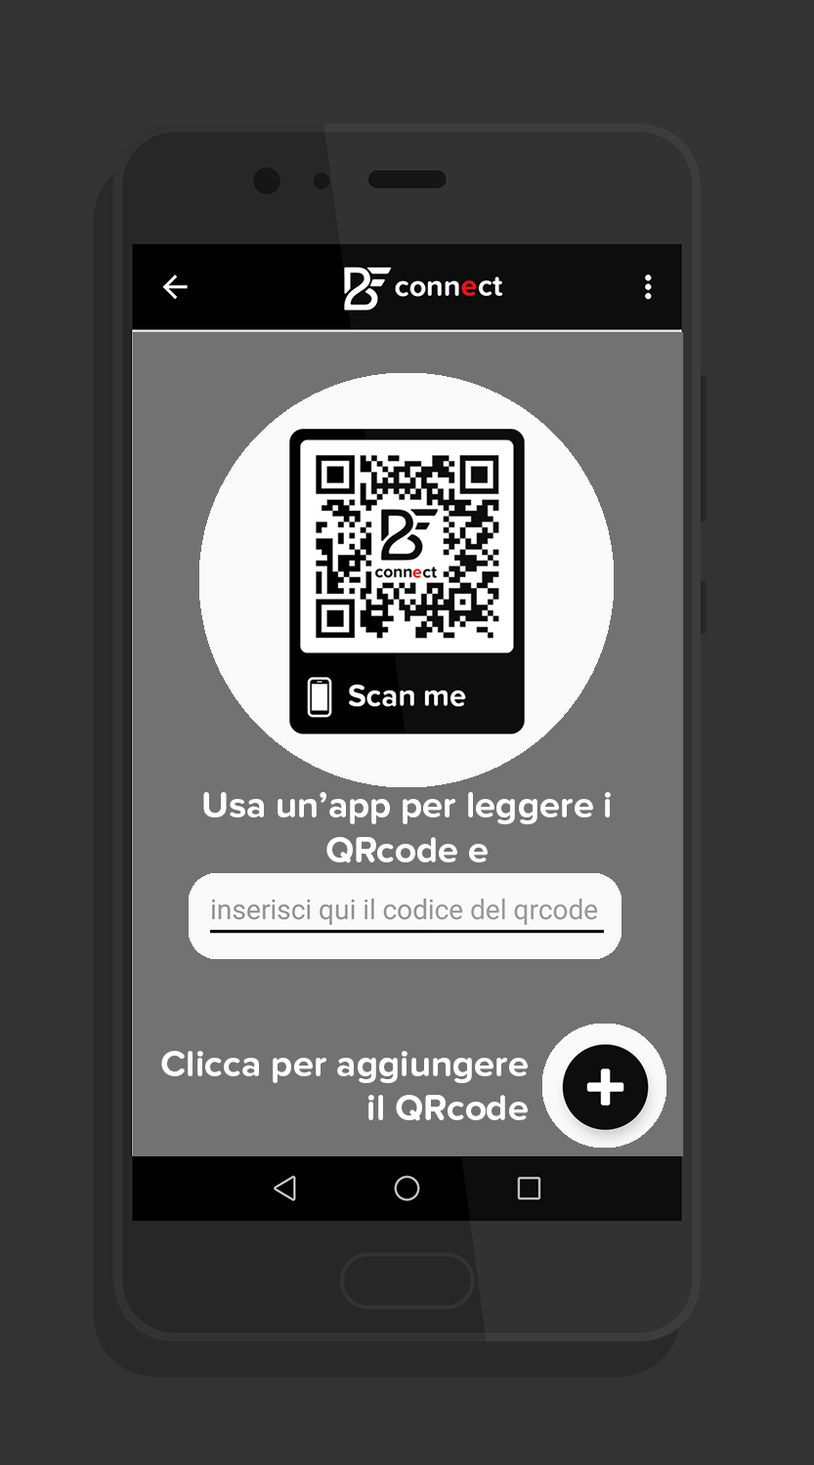
<style>
.page{position:relative;width:814px;height:1465px;background:#333333}
.page>*{position:absolute;margin:0}
.t1{font:37.1px "ProximaNovaSoft-Bold";color:#ffffff}
</style>
<div class="page">
<p class="t1" style="left:203px;top:792px;width:408px;height:72px;text-align:center">Usa un’app per leggere i<br>QRcode e</p>
<p class="t1" style="left:161px;top:1051px;width:367px;height:70px">Clicca per aggiungere<br>il QRcode</p>
</div>
